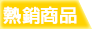
<style>
.page{position:relative;width:92px;height:29px;background:#ffffff}
.page>*{position:absolute;margin:0}
.t1{font:18px "AdobeFanHeitiStd-Bold";color:#ffffff;font-weight:bold}
</style>
<div class="page">
<p class="t1" style="left:3px;top:6px;width:74px;height:18px">熱銷商品</p>
</div>
